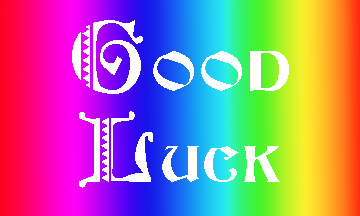
<style>
.page{position:relative;width:360px;height:216px}
.page>*{position:absolute;margin:0}
.t1{font:84.4px "BeaconTT";letter-spacing:0.1em;color:#ffffff;font-variant:small-caps}
.t2{font:84.4px "FolksTT";letter-spacing:0.1em;color:#ffffff;font-variant:small-caps}
.t3{font:75.6px "FolksTT";letter-spacing:0.1em;color:#ffffff;font-variant:small-caps}
.t4{font:75.6px "BeaconTT";letter-spacing:0.1em;color:#ffffff;font-variant:small-caps}
</style>
<div class="page">
<p class="t1" style="left:72px;top:20px;width:217px;height:168px;text-align:center"><span class="t2">G</span>ood<br><span class="t3">L</span><span class="t4">uck</span></p>
</div>
